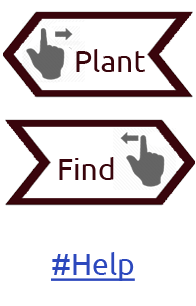
<style>
.page{position:relative;width:196px;height:306px;background:#ffffff}
.page>*{position:absolute;margin:0}
.t1{font:30px "Ubuntu";color:#39050c}
.t2{font:30px "Ubuntu";color:#2c48bd;text-decoration:underline}
</style>
<div class="page">
<p class="t1" style="left:76px;top:49px;width:69px;height:23px">Plant</p>
<p class="t1" style="left:59px;top:157px;width:55px;height:23px">Find</p>
<p class="t2" style="left:51px;top:252px;width:84px;height:29px">#Help</p>
</div>
